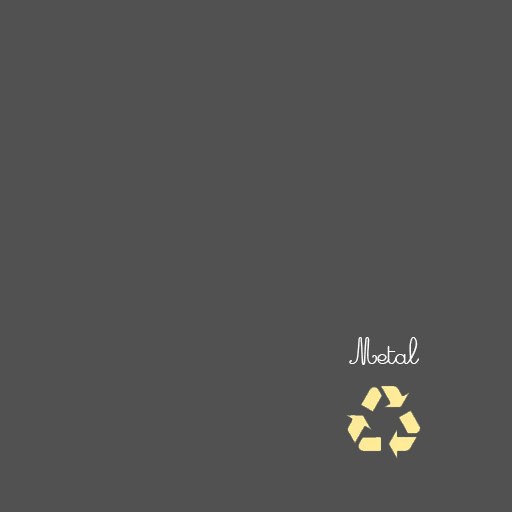
<style>
.page{position:relative;width:512px;height:512px;background:#515151}
.page>*{position:absolute;margin:0}
.t1{font:30px "Cursivestandard";color:#ffffff}
</style>
<div class="page">
<p class="t1" style="left:349px;top:337px;width:70px;height:28px">Metal</p>
</div>
